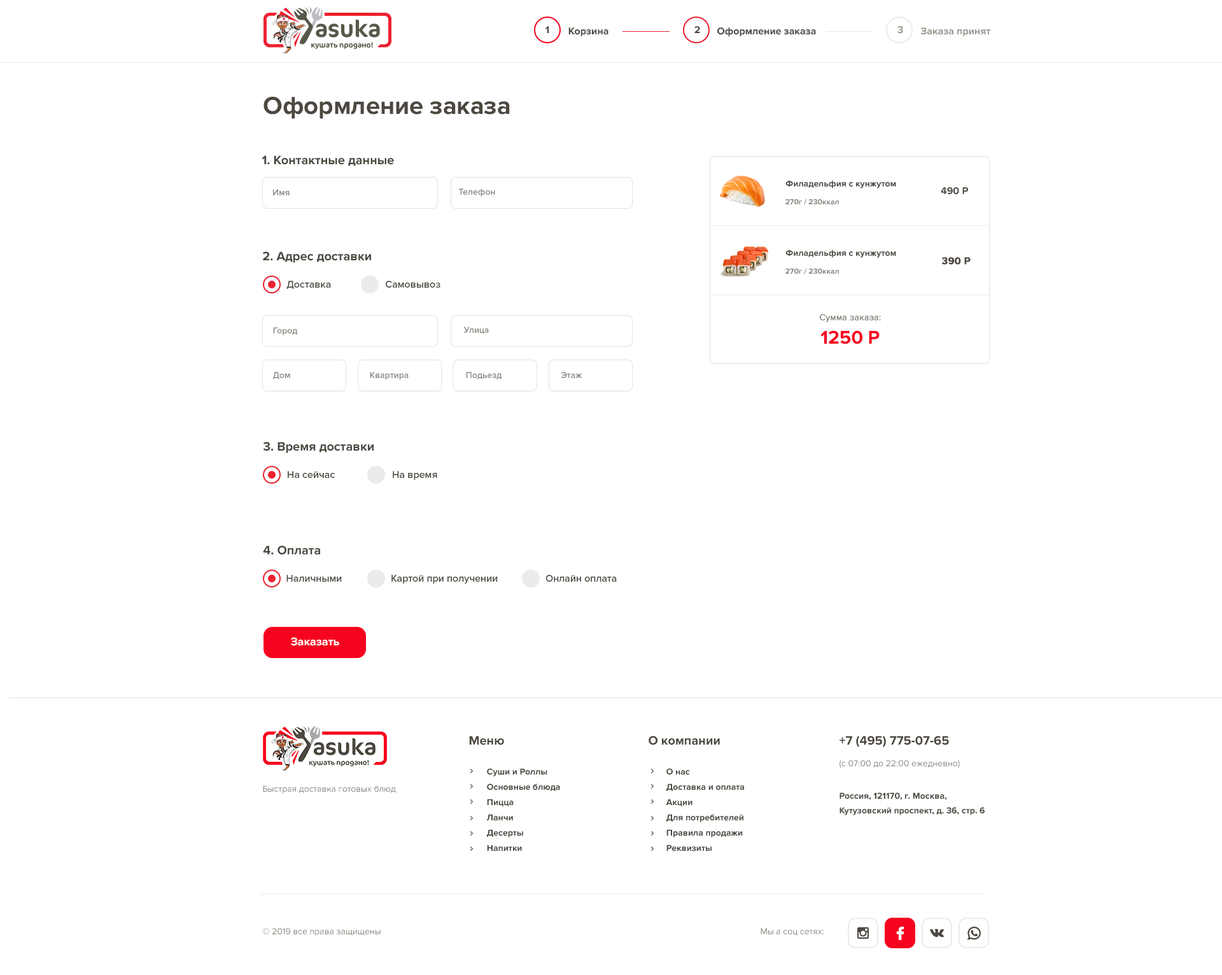
<style>
.page{position:relative;width:1222px;height:975px;background:#ffffff}
.page>*{position:absolute;margin:0}
.t1{font:10.2px "ProximaNova-Bold";color:#4c4840}
.t2{font:10.2px "ProximaNova-Bold";color:#9d988f}
.t3{font:25.5px "ProximaNova-Bold";color:#4c4840}
.t4{font:12.7px "ProximaNova-Bold";color:#4c4840}
.t5{font:8.9px "ProximaNova-Bold";color:#4c4840}
.t6{font:8.9px "ProximaNova-Semibold";color:#8a867e}
.t7{font:7.6px "ProximaNova-Bold";color:#8a867e}
.t8{font:10.2px "ProximaNova-Bold";color:#4c4840;font-weight:bold}
.t9{font:10.2px "ProximaNova-Semibold";color:#4c4840}
.t10{font:8.9px "ProximaNova-Regular";color:#8a867e;font-weight:bold}
.t11{font:19.1px "ProximaNova-Bold";color:#f6041f}
.t12{font:11.5px "ProximaNova-Bold";color:#ffffff}
.t13{font:8.9px "ProximaNova-Regular";color:#8a867e}
.t14{font:8.9px/15.3px "ProximaNova-Bold";color:#4c4840}
.t15{font:8.9px/14.6px "ProximaNova-Bold";color:#4c4840}
</style>
<div class="page">
<p class="t1" style="left:546px;top:26px;width:3px;height:7px">1</p>
<p class="t1" style="left:569px;top:27px;width:40px;height:9px">Корзина</p>
<p class="t1" style="left:695px;top:26px;width:5px;height:7px">2</p>
<p class="t1" style="left:718px;top:27px;width:98px;height:9px">Оформление заказа</p>
<p class="t2" style="left:898px;top:26px;width:5px;height:8px">3</p>
<p class="t2" style="left:921px;top:27px;width:70px;height:9px">Заказа принят</p>
<p class="t3" style="left:264px;top:97px;width:246px;height:22px">Оформление заказа</p>
<p class="t4" style="left:262px;top:155px;width:132px;height:11px">1. Контактные данные</p>
<p class="t5" style="left:786px;top:180px;width:110px;height:8px">Филадельфия с кунжутом</p>
<p class="t6" style="left:273px;top:189px;width:17px;height:6px">Имя</p>
<p class="t6" style="left:459px;top:188px;width:36px;height:9px">Телефон</p>
<p class="t1" style="left:941px;top:187px;width:28px;height:8px">490 P</p>
<p class="t7" style="left:786px;top:199px;width:53px;height:6px">270г / 230ккал</p>
<p class="t4" style="left:263px;top:251px;width:108px;height:12px">2. Адрес доставки</p>
<p class="t5" style="left:786px;top:250px;width:110px;height:8px">Филадельфия с кунжутом</p>
<p class="t8" style="left:942px;top:257px;width:29px;height:8px">390 P</p>
<p class="t7" style="left:786px;top:268px;width:53px;height:6px">270г / 230ккал</p>
<p class="t9" style="left:287px;top:281px;width:44px;height:8px">Доставка</p>
<p class="t9" style="left:386px;top:281px;width:55px;height:7px">Самовывоз</p>
<p class="t10" style="left:820px;top:314px;width:61px;height:8px">Сумма заказа:</p>
<p class="t6" style="left:273px;top:327px;width:24px;height:9px">Город</p>
<p class="t6" style="left:464px;top:327px;width:25px;height:7px">Улица</p>
<p class="t11" style="left:821px;top:330px;width:59px;height:14px">1250 P</p>
<p class="t6" style="left:273px;top:372px;width:17px;height:7px">Дом</p>
<p class="t6" style="left:370px;top:372px;width:39px;height:8px">Квартира</p>
<p class="t6" style="left:466px;top:372px;width:36px;height:7px">Подьезд</p>
<p class="t6" style="left:561px;top:372px;width:22px;height:6px">Этаж</p>
<p class="t4" style="left:263px;top:442px;width:111px;height:11px">3. Время доставки</p>
<p class="t9" style="left:288px;top:471px;width:47px;height:7px">На сейчас</p>
<p class="t9" style="left:393px;top:471px;width:44px;height:9px">На время</p>
<p class="t4" style="left:263px;top:546px;width:57px;height:9px">4. Оплата</p>
<p class="t9" style="left:287px;top:575px;width:55px;height:7px">Наличными</p>
<p class="t9" style="left:392px;top:575px;width:106px;height:9px">Картой при получении</p>
<p class="t9" style="left:546px;top:575px;width:71px;height:7px">Онлайн оплата</p>
<p class="t12" style="left:291px;top:637px;width:48px;height:9px">Заказать</p>
<p class="t4" style="left:469px;top:736px;width:35px;height:10px">Меню</p>
<p class="t4" style="left:649px;top:736px;width:71px;height:10px">О компании</p>
<p class="t4" style="left:840px;top:736px;width:109px;height:11px">+7 (495) 775-07-65</p>
<p class="t13" style="left:840px;top:760px;width:120px;height:9px">(с 07:00 до 22:00 ежедневно)</p>
<p class="t14" style="left:487px;top:769px;width:73px;height:83px">Суши и Роллы<br>Основные блюда<br>Пицца<br>Ланчи<br>Десерты<br>Напитки</p>
<p class="t14" style="left:666px;top:769px;width:78px;height:83px">О нас<br>Доставка и оплата <br>Акции<br>Для потребителей<br>Правила продажи<br>Реквизиты</p>
<p class="t13" style="left:263px;top:786px;width:133px;height:8px">Быстрая доставка готовых блюд</p>
<p class="t15" style="left:840px;top:793px;width:145px;height:23px">Россия, 121170, г. Москва, <br>Кутузовский проспект, д. 36, стр. 6</p>
<p class="t13" style="left:263px;top:928px;width:118px;height:9px">© 2019 все права защищены</p>
<p class="t13" style="left:761px;top:928px;width:63px;height:8px">Мы а соц сетях:</p>
</div>
